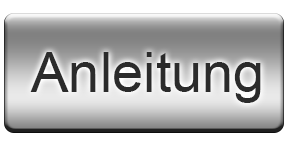
<style>
.page{position:relative;width:288px;height:144px;background:#ffffff}
.page>*{position:absolute;margin:0}
.t1{font:56px "ArialMT";color:#2b2b2b}
</style>
<div class="page">
<p class="t1" style="left:30px;top:52px;width:231px;height:51px">Anleitung</p>
</div>
